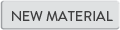
<style>
.page{position:relative;width:120px;height:30px;background:#dfe1e2}
.page>*{position:absolute;margin:0}
.t1{font:14.2px "BrandonGrotesque-Regular";color:#404041}
</style>
<div class="page">
<p class="t1" style="left:12px;top:11px;width:101px;height:10px">NEW MATERIAL</p>
</div>
